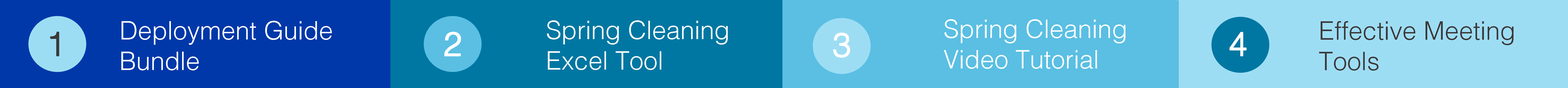
<style>
.page{position:relative;width:1568px;height:88px;background:#9dddf4}
.page>*{position:absolute;margin:0}
.t1{font:25.5px "Helvetica-Light";color:#ffffff}
.t2{font:25.5px "Helvetica-Light";color:#3b3838}
.t3{font:33.3px "Helvetica-Light";color:#3b3838;font-weight:bold}
.t4{font:33.3px "Helvetica-Light";color:#fefefe;font-weight:bold}
.t5{font:33.3px "Helvetica-Light";color:#ffffff;font-weight:bold}
</style>
<div class="page">
<p class="t1" style="left:121px;top:21px;width:211px;height:50px">Deployment Guide<br>Bundle</p>
<p class="t1" style="left:547px;top:20px;width:181px;height:50px">Spring Cleaning<br>Excel Tool</p>
<p class="t1" style="left:944px;top:19px;width:181px;height:50px">Spring Cleaning<br>Video Tutorial</p>
<p class="t2" style="left:1319px;top:21px;width:195px;height:50px">Effective Meeting<br>Tools</p>
<p class="t3" style="left:50px;top:32px;width:9px;height:24px">1</p>
<p class="t4" style="left:444px;top:32px;width:17px;height:24px">2</p>
<p class="t5" style="left:833px;top:33px;width:17px;height:25px">3</p>
<p class="t4" style="left:1230px;top:32px;width:17px;height:24px">4</p>
</div>
